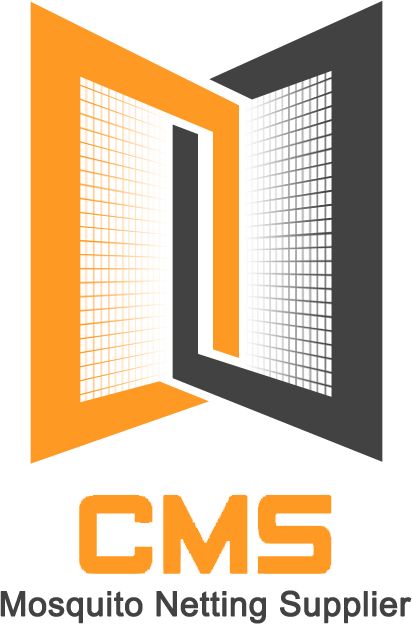
<style>
.page{position:relative;width:412px;height:624px;background:#ffffff}
.page>*{position:absolute;margin:0}
.t1{font:34px "ArialMT";color:#424242;font-weight:bold}
</style>
<div class="page">
<p class="t1" style="left:0px;top:590px;width:412px;height:34px">Mosquito Netting Supplier</p>
</div>
